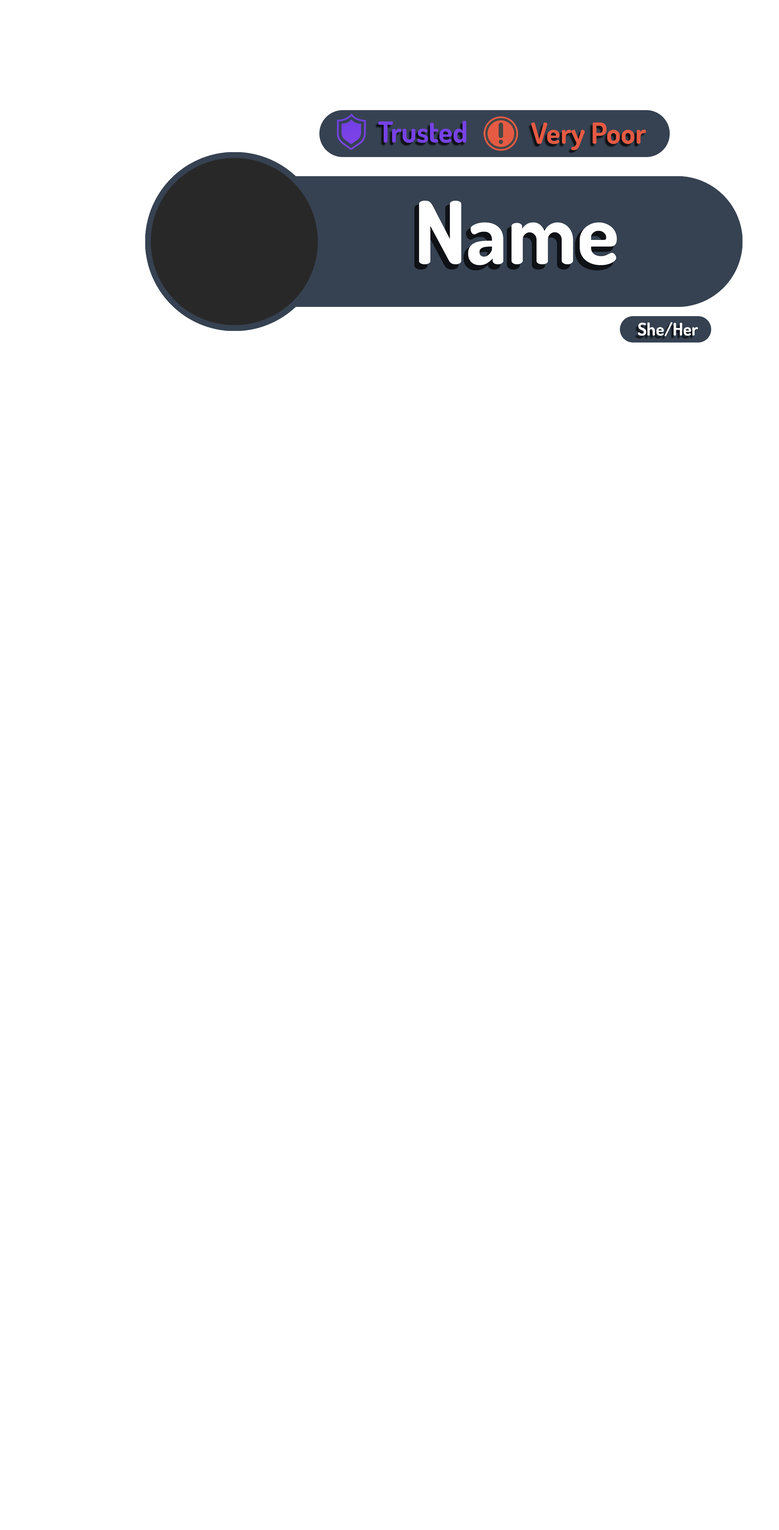
<style>
.page{position:relative;width:779px;height:1530px;background:#ffffff}
.page>*{position:absolute;margin:0}
.t1{font:29px "Dosis-Bold";color:#7741e7}
.t2{font:29px "Dosis-Bold";color:#e55a42}
.t3{font:87px "Dosis-Bold";color:#ffffff}
.t4{font:17.4px "Dosis-Bold";color:#ffffff}
</style>
<div class="page">
<p class="t1" style="left:378px;top:121px;width:88px;height:22px">Trusted</p>
<p class="t2" style="left:531px;top:122px;width:115px;height:28px">Very Poor</p>
<p class="t3" style="left:419px;top:201px;width:198px;height:64px">Name</p>
<p class="t4" style="left:638px;top:322px;width:60px;height:15px">She/Her</p>
</div>
